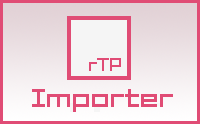
<style>
.page{position:relative;width:200px;height:124px}
.page>*{position:absolute;margin:0}
.t1{font:20px "GrixelAcme7Wide";color:#e04c75}
</style>
<div class="page">
<p class="t1" style="left:32px;top:89px;width:141px;height:23px">Importer</p>
</div>
